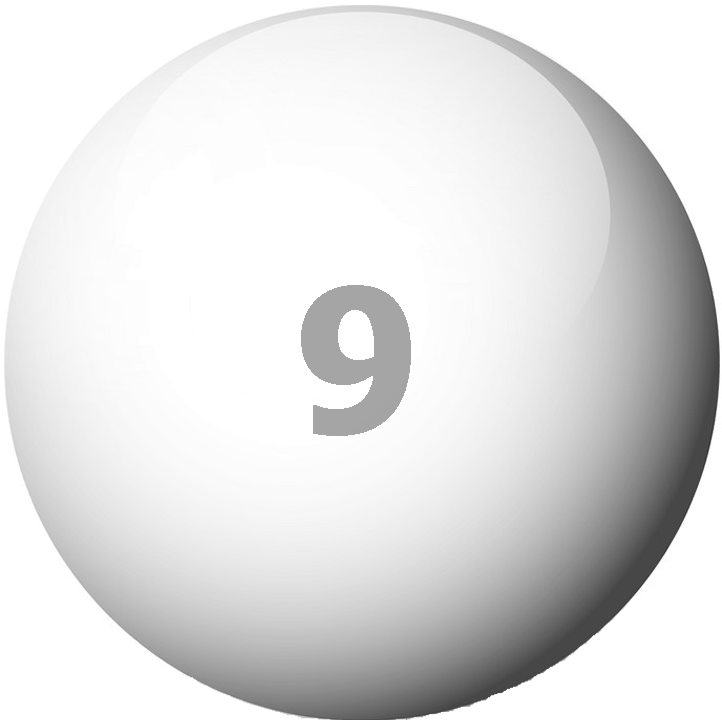
<style>
.page{position:relative;width:722px;height:720px;background:#ffffff}
.page>*{position:absolute;margin:0}
.t1{font:200px "Tahoma-Bold";color:#a5a5a5}
</style>
<div class="page">
<p class="t1" style="left:301px;top:285px;width:110px;height:151px">9</p>
</div>
